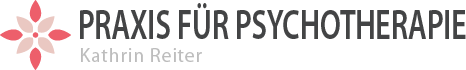
<style>
.page{position:relative;width:466px;height:70px;background:#ffffff}
.page>*{position:absolute;margin:0}
.t1{font:42.8px "MyriadPro-Semibold";color:#434445;text-transform:uppercase;scale:0.69 1}
.t2{font:19.7px "MyriadPro-Regular";letter-spacing:0.04em;color:#bdbdbd}
</style>
<div class="page">
<p class="t1" style="left:80px;top:3px;width:386px;height:36px">Praxis für Psychotherapie</p>
<p class="t2" style="left:81px;top:48px;width:121px;height:14px">Kathrin Reiter</p>
</div>
